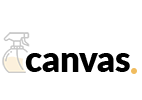
<style>
.page{position:relative;width:142px;height:100px;background:#ffffff}
.page>*{position:absolute;margin:0}
.t1{font:35px "Lato-Black";letter-spacing:-0.01em;color:#000000}
</style>
<div class="page">
<p class="t1" style="left:25px;top:53px;width:105px;height:19px">canvas</p>
</div>
